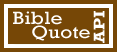
<style>
.page{position:relative;width:117px;height:52px;background:#764706}
.page>*{position:absolute;margin:0}
.t1{font:18.1px/13.6px "Rockwell";color:#ffffff;scale:1.17 1}
.t2{font:16px "Rockwell-Bold";color:#ffffff;scale:1.13 1}
</style>
<div class="page">
<p class="t1" style="left:13px;top:11px;width:77px;height:30px;text-align:center">Bible<br>         Quote</p>
<p class="t2" style="left:93px;top:11px;width:12px;height:32px;rotate:-90deg">API</p>
</div>
